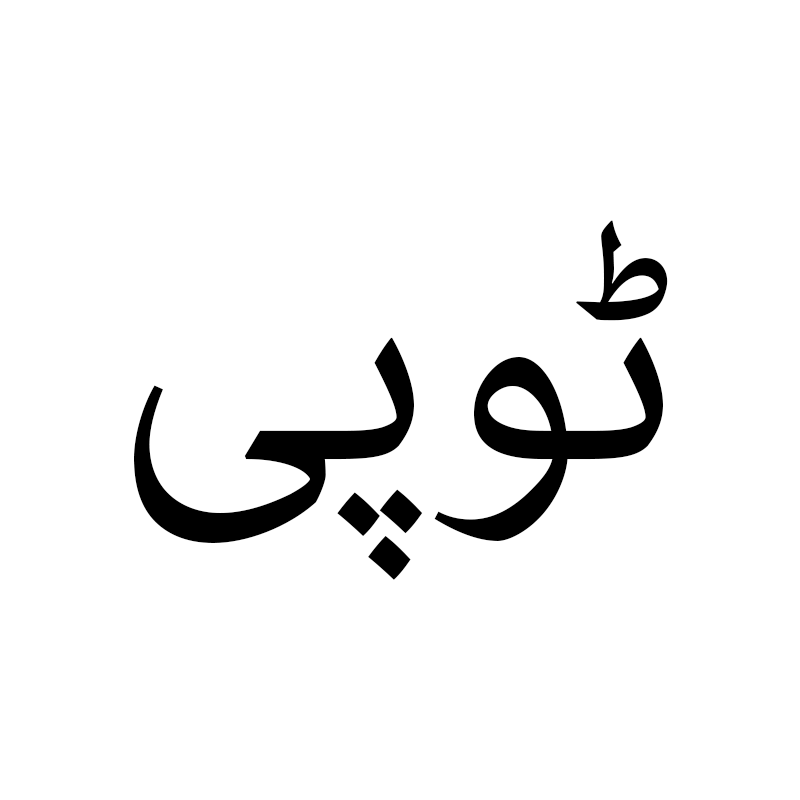
<style>
.page{position:relative;width:800px;height:800px;background:#ffffff}
.page>*{position:absolute;margin:0}
.t1{font:450px "AdobeArabic-Regular";color:#000000}
</style>
<div class="page">
<p class="t1" style="left:134px;top:220px;width:534px;height:360px">ٹوپی</p>
</div>
